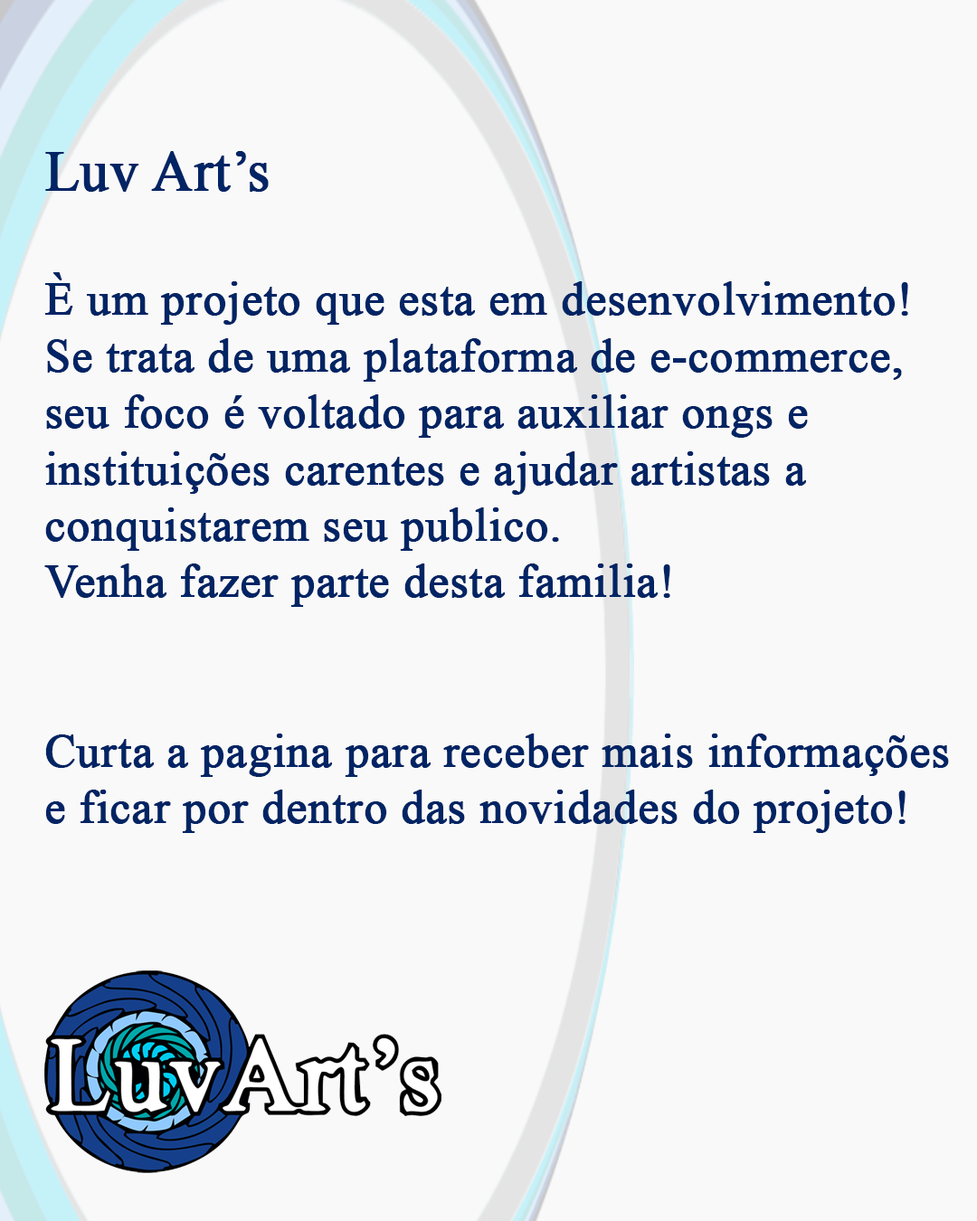
<style>
.page{position:relative;width:977px;height:1221px;background:#f9f9f9}
.page>*{position:absolute;margin:0}
.t1{font:47px "TimesNewRomanPSMT";color:#002464;font-weight:bold}
.t2{font:56.7px "TimesNewRomanPSMT";color:#002464;font-weight:bold}
</style>
<div class="page">
<p class="t1" style="left:44px;top:151px;width:905px;height:682px"><span class="t2">Luv Art’s <br><br></span>È um projeto que esta em desenvolvimento!<br>Se trata de uma plataforma de e-commerce,<br>seu foco é voltado para auxiliar ongs e <br>instituições carentes e ajudar artistas a  <br>conquistarem seu publico.<br>Venha fazer parte desta familia!<br><br><br>Curta a pagina para receber mais informações<br>e ficar por dentro das novidades do projeto!</p>
</div>
